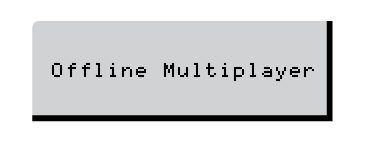
<style>
.page{position:relative;width:375px;height:142px;background:#d1d2d4}
.page>*{position:absolute;margin:0}
.t1{font:16px "Mono0756";color:#000000}
</style>
<div class="page">
<p class="t1" style="left:51px;top:62px;width:264px;height:20px">Offline Multiplayer</p>
</div>
